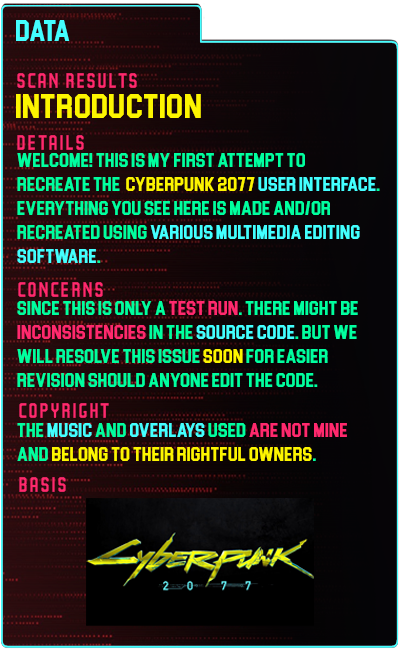
<style>
.page{position:relative;width:400px;height:650px}
.page>*{position:absolute;margin:0}
.t1{font:30px "Blockletter";color:#43ffff}
.t2{font:35px "Party-Lights-[WLM]-Flat";color:#ff296d}
.t3{font:35px "Blockletter";color:#fdf500}
.t4{font:20px "Blockletter";color:#00ff9f}
.t5{font:20px "Blockletter";color:#fdf500}
.t6{font:20px "Blockletter";color:#43ffff}
.t7{font:20px "Blockletter";color:#ff296d}
</style>
<div class="page">
<p class="t1" style="left:16px;top:20px;width:54px;height:21px">DATA</p>
<p class="t2" style="left:17px;top:73px;width:120px;height:15px">Scan REsults</p>
<p class="t3" style="left:16px;top:94px;width:185px;height:24px">introduction</p>
<p class="t2" style="left:17px;top:135px;width:67px;height:15px">details</p>
<p class="t4" style="left:17px;top:153px;width:363px;height:110px">welcome! this is my first attempt to<br>recreate the  <span class="t5">cyberpunk 2077 </span><span class="t6">user interface</span>. everything you see here is made and/or recreated using <span class="t6">various multimedia editing software</span>.</p>
<p class="t2" style="left:18px;top:282px;width:85px;height:15px">concerns</p>
<p class="t4" style="left:17px;top:301px;width:341px;height:86px">since this is only a <span class="t7">test run</span>. there might be <span class="t7">inconsistencies</span> in the <span class="t6">source code</span>. but we will resolve this issue <span class="t5">soon</span> for easier revision should anyone edit the code.</p>
<p class="t2" style="left:19px;top:403px;width:90px;height:15px">copyright</p>
<p class="t5" style="left:17px;top:423px;width:330px;height:38px"><span class="t4">the </span><span class="t6">music</span><span class="t4"> and </span><span class="t6">overlays</span><span class="t4"> used </span><span class="t7">are not mine</span><span class="t4"> and </span>belong to their rightful owners<span class="t4">.</span></p>
<p class="t2" style="left:19px;top:477px;width:47px;height:15px">Basis</p>
</div>
